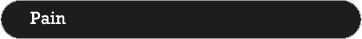
<style>
.page{position:relative;width:362px;height:39px;background:#1d1d1b}
.page>*{position:absolute;margin:0}
.t1{font:18px "Rockwell";color:#ffffff}
</style>
<div class="page">
<p class="t1" style="left:30px;top:11px;width:36px;height:14px">Pain</p>
</div>
